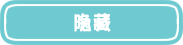
<style>
.page{position:relative;width:183px;height:45px;background:#6ecad0}
.page>*{position:absolute;margin:0}
.t1{font:12px "shetumodengxiaofangti";color:#ffffff;font-weight:bold;scale:0.94 1}
</style>
<div class="page">
<p class="t1" style="left:74px;top:13px;width:37px;height:19px">隐藏</p>
</div>
